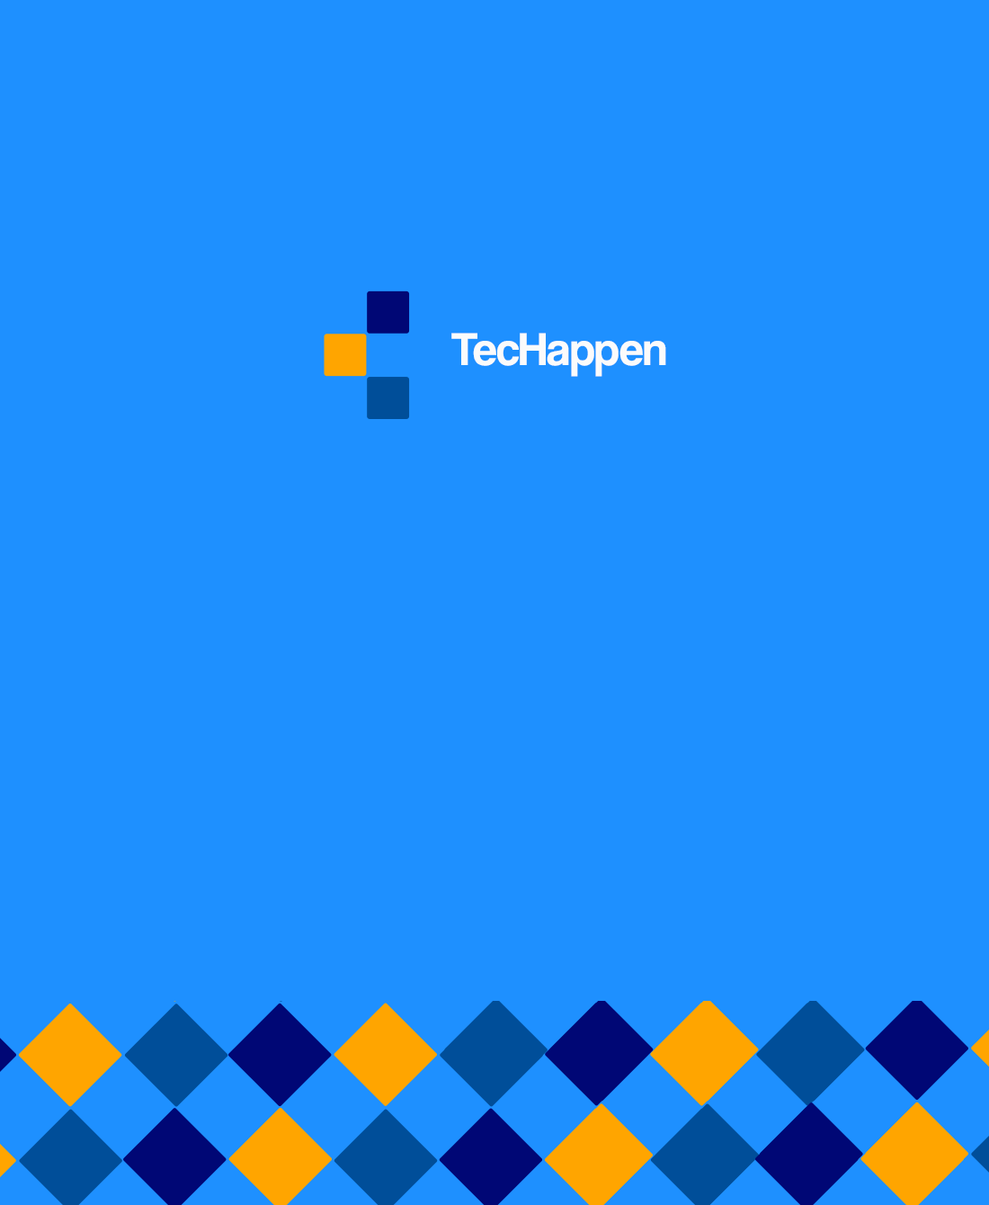
<style>
.page{position:relative;width:989px;height:1205px;background:#1e90ff}
.page>*{position:absolute;margin:0}
.t1{font:48.1px "CoolveticaRg-Regular";letter-spacing:-0.005em;color:#fbfbfb}
</style>
<div class="page">
<p class="t1" style="left:452px;top:333px;width:214px;height:44px">TecHappen</p>
</div>
